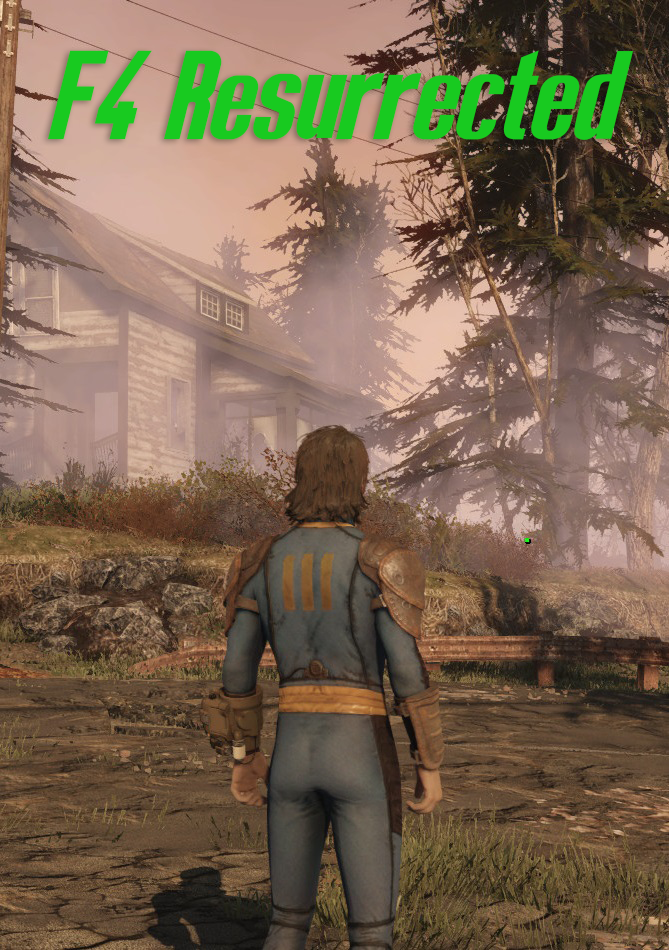
<style>
.page{position:relative;width:669px;height:950px}
.page>*{position:absolute;margin:0}
.t1{font:118.3px "SoleSurvivor";color:#18ca20}
</style>
<div class="page">
<p class="t1" style="left:48px;top:50px;width:585px;height:90px">F4 Resurrected</p>
</div>
